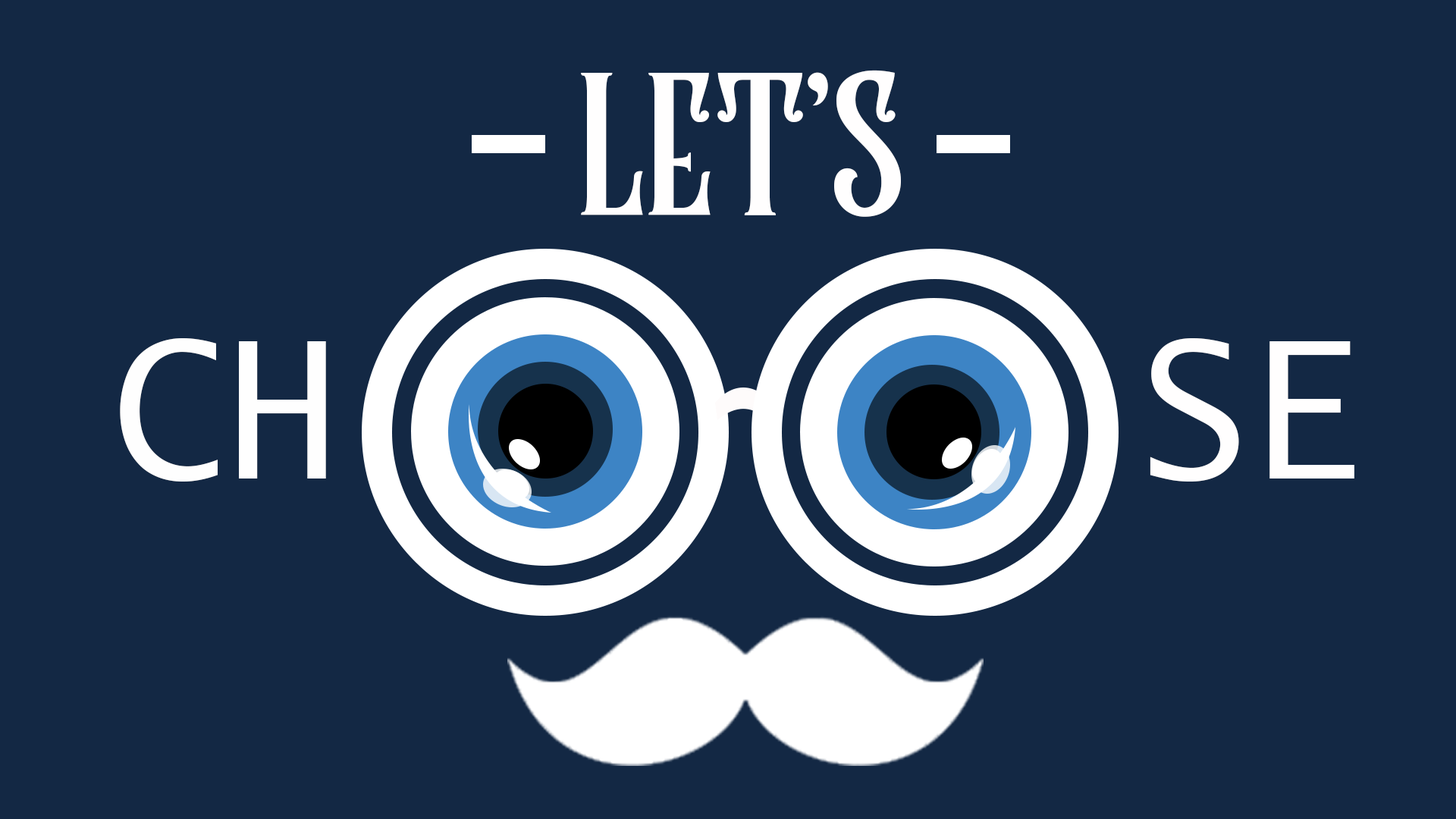
<style>
.page{position:relative;width:1456px;height:819px;background:#132844}
.page>*{position:absolute;margin:0}
.t1{font:189.6px "RumbleBrave";color:#fffefe}
.t2{font:189.6px "LucidaSans-Typewriter";color:#fefefe}
.t3{font:189.6px "LucidaSans-Typewriter";color:#fffefe}
</style>
<div class="page">
<p class="t1" style="left:581px;top:70px;width:320px;height:147px">LET’S</p>
<p class="t2" style="left:120px;top:338px;width:206px;height:144px">CH</p>
<p class="t3" style="left:1150px;top:338px;width:204px;height:144px">SE</p>
</div>
